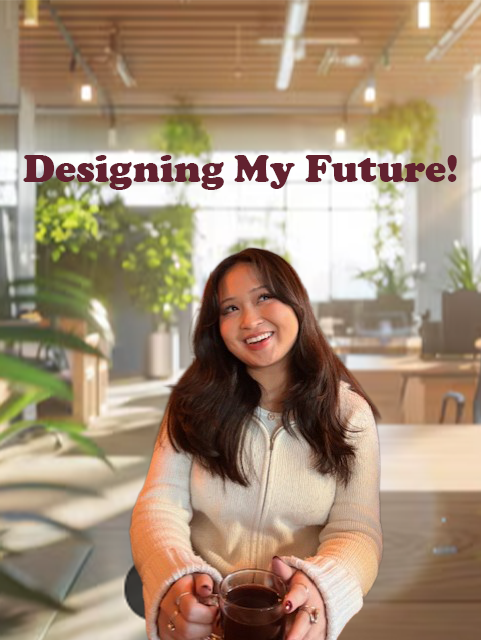
<style>
.page{position:relative;width:481px;height:640px}
.page>*{position:absolute;margin:0}
.t1{font:40.2px "CooperBlack";color:#62212f}
</style>
<div class="page">
<p class="t1" style="left:23px;top:155px;width:434px;height:35px">Designing My Future!</p>
</div>
